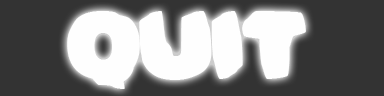
<style>
.page{position:relative;width:384px;height:96px;background:#333333}
.page>*{position:absolute;margin:0}
.t1{font:90px "Bomberman";color:#fefefe}
</style>
<div class="page">
<p class="t1" style="left:67px;top:11px;width:239px;height:78px">Quit</p>
</div>
